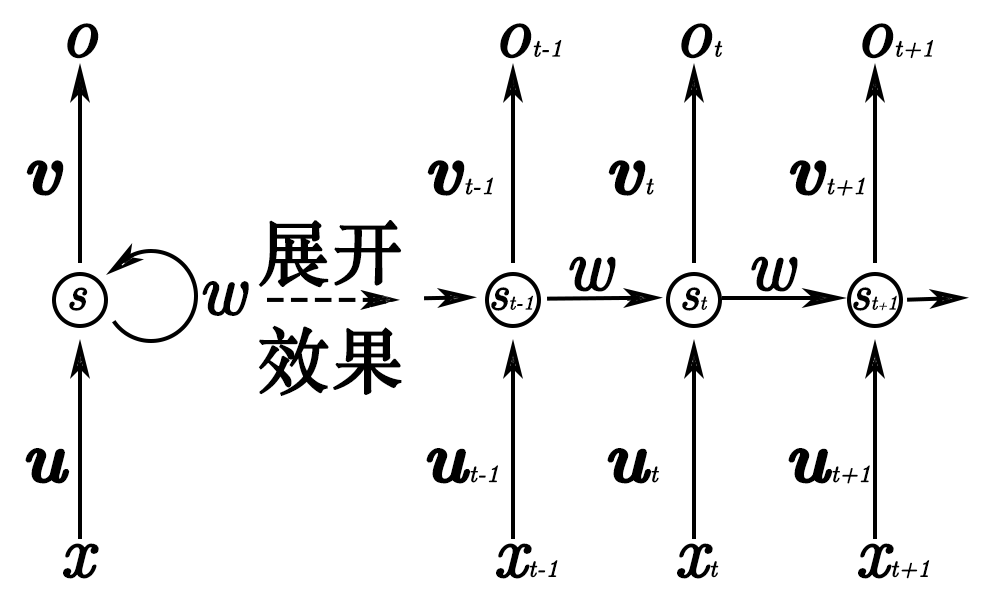
<style>
.page{position:relative;width:1000px;height:600px;background:#ffffff}
.page>*{position:absolute;margin:0}
.t1{font:72px "Euclid-Italic";color:#000000;font-weight:bold}
.t2{font:24px "Euclid-Italic";color:#000000;font-weight:bold}
.t3{font:72px "Euclid-BoldItalic";color:#000000;font-weight:bold}
.t4{font:72px/108px "STSongti-SC-Regular";color:#000000;font-weight:bold}
.t5{font:48px "Euclid-Italic";color:#000000;font-weight:bold}
.t6{font:20px "Euclid-Italic";color:#000000;font-weight:bold}
.t7{font:12px "Euclid-Italic";color:#000000;font-weight:bold}
</style>
<div class="page">
<p class="t1" style="left:67px;top:23px;width:32px;height:36px">o</p>
<p class="t2" style="left:500px;top:23px;width:62px;height:36px"><span class="t1">o</span>t-1</p>
<p class="t1" style="left:681px;top:23px;width:42px;height:36px">o<span class="t2">t</span></p>
<p class="t2" style="left:862px;top:23px;width:71px;height:36px"><span class="t1">o</span>t+1</p>
<p class="t3" style="left:26px;top:160px;width:38px;height:36px">v</p>
<p class="t2" style="left:427px;top:160px;width:66px;height:36px"><span class="t3">v</span>t-1</p>
<p class="t3" style="left:608px;top:160px;width:46px;height:36px">v<span class="t2">t</span></p>
<p class="t2" style="left:789px;top:160px;width:76px;height:36px"><span class="t3">v</span>t+1</p>
<p class="t4" style="left:258px;top:220px;width:144px;height:176px">展开<br>效果</p>
<p class="t1" style="left:569px;top:256px;width:47px;height:36px">w</p>
<p class="t1" style="left:751px;top:256px;width:47px;height:36px">w</p>
<p class="t1" style="left:202px;top:281px;width:47px;height:35px">w</p>
<p class="t5" style="left:69px;top:287px;width:19px;height:24px">s</p>
<p class="t6" style="left:491px;top:287px;width:42px;height:24px"><span class="t5">s</span>t-1</p>
<p class="t5" style="left:682px;top:287px;width:26px;height:24px">s<span class="t6">t</span></p>
<p class="t5" style="left:853px;top:287px;width:44px;height:24px">s<span class="t6">t</span><span class="t7">+</span><span class="t6">1</span></p>
<p class="t3" style="left:25px;top:448px;width:45px;height:36px">u</p>
<p class="t2" style="left:426px;top:448px;width:72px;height:36px"><span class="t3">u</span>t-1</p>
<p class="t3" style="left:607px;top:448px;width:52px;height:36px">u<span class="t2">t</span></p>
<p class="t2" style="left:788px;top:448px;width:82px;height:36px"><span class="t3">u</span>t+1</p>
<p class="t1" style="left:63px;top:543px;width:36px;height:36px">x</p>
<p class="t2" style="left:496px;top:543px;width:62px;height:36px"><span class="t1">x</span>t-1</p>
<p class="t1" style="left:677px;top:543px;width:42px;height:36px">x<span class="t2">t</span></p>
<p class="t2" style="left:858px;top:543px;width:72px;height:36px"><span class="t1">x</span>t+1</p>
</div>
